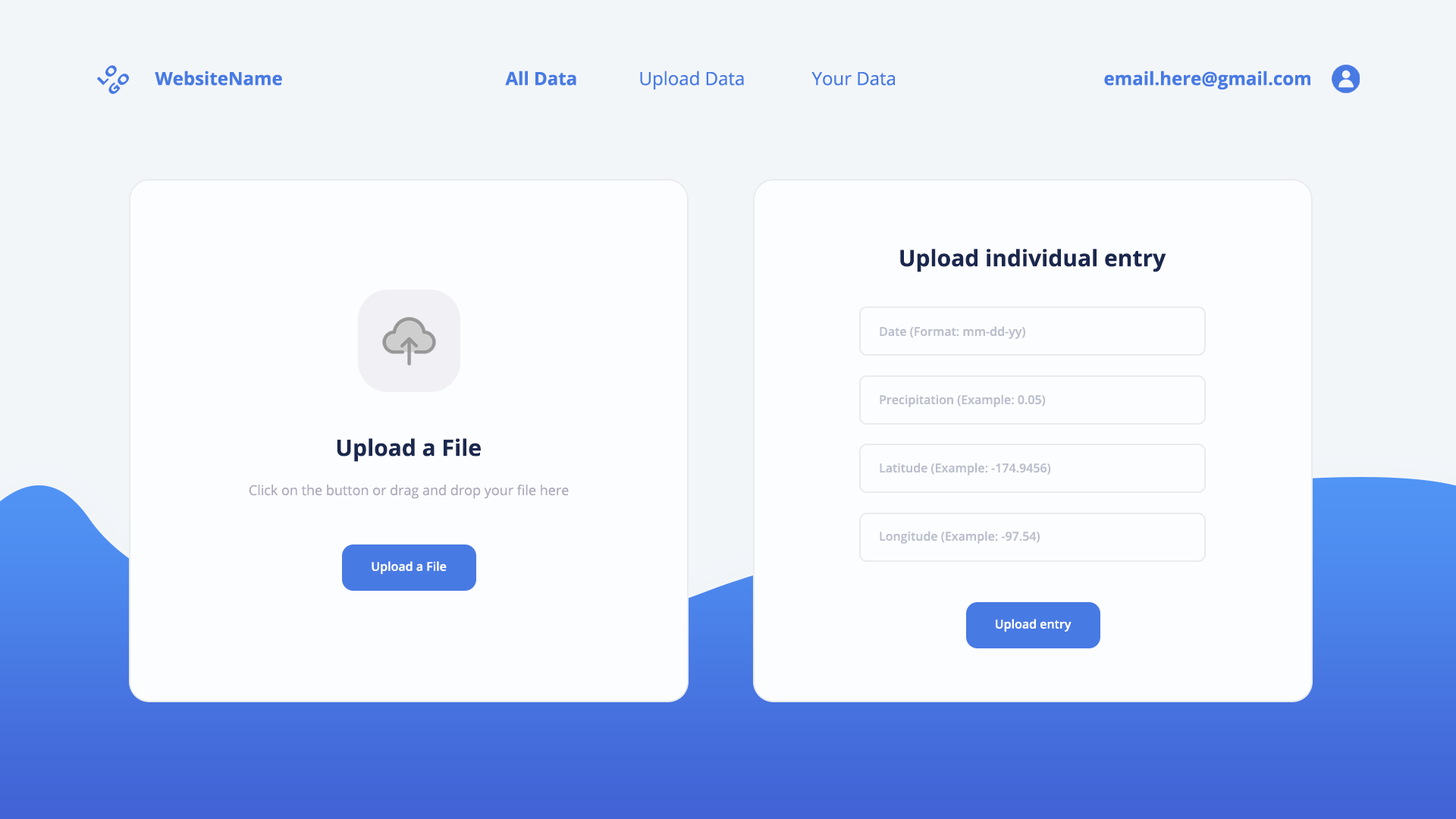
<style>
.page{position:relative;width:1456px;height:819px;background:#fcfdfe}
.page>*{position:absolute;margin:0}
.t1{font:12.1px "OpenSans-Bold";color:#487ae4;scale:1.45 1}
.t2{font:18.2px "OpenSans-Bold";color:#487ae4}
.t3{font:18.2px "OpenSans";color:#487ae4}
.t4{font:22.7px "OpenSans-Bold";color:#1a274e}
.t5{font:12.1px/68.2px "OpenSans-Semibold";color:#babecc}
.t6{font:13.6px "OpenSans";color:#aca9bc}
.t7{font:12.1px "OpenSans-Semibold";color:#ffffff}
</style>
<div class="page">
<p class="t1" style="left:97px;top:65px;width:32px;height:29px;rotate:-45deg">LO<br>GO</p>
<p class="t2" style="left:155px;top:71px;width:127px;height:15px">WebsiteName</p>
<p class="t2" style="left:505px;top:71px;width:71px;height:15px">All Data</p>
<p class="t3" style="left:640px;top:71px;width:104px;height:18px">Upload Data</p>
<p class="t3" style="left:811px;top:72px;width:84px;height:14px">Your Data</p>
<p class="t2" style="left:1104px;top:71px;width:206px;height:18px">email.here@gmail.com</p>
<p class="t4" style="left:900px;top:249px;width:266px;height:23px">Upload individual entry</p>
<p class="t5" style="left:880px;top:326px;width:171px;height:218px">Date (Format: mm-dd-yy)<br>Precipitation (Example: 0.05)<br>Latitude (Example: -174.9456)<br>Longitude (Example: -97.54)</p>
<p class="t4" style="left:337px;top:438px;width:144px;height:24px">Upload a File</p>
<p class="t6" style="left:249px;top:485px;width:320px;height:14px">Click on the button or drag and drop your file here</p>
<p class="t7" style="left:372px;top:561px;width:75px;height:13px">Upload a File</p>
<p class="t7" style="left:996px;top:619px;width:76px;height:13px">Upload entry</p>
</div>
